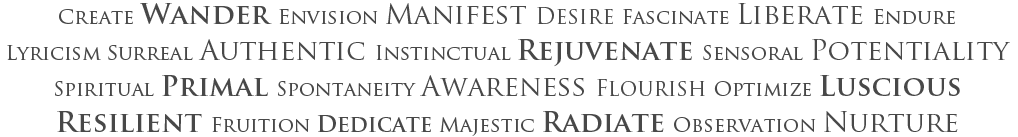
<style>
.page{position:relative;width:1018px;height:137px;background:#ffffff}
.page>*{position:absolute;margin:0}
.t1{font:20px/36px "TrajanPro-Regular";letter-spacing:-0.005em;color:#484848}
.t2{font:28px/36px "TrajanPro-Bold";letter-spacing:-0.005em;color:#484848}
.t3{font:28px/36px "TrajanPro-Regular";letter-spacing:-0.005em;color:#484848}
.t4{font:22px/36px "TrajanPro-Regular";letter-spacing:-0.005em;color:#484848}
.t5{font:22px/36px "TrajanPro-Bold";letter-spacing:-0.005em;color:#484848}
</style>
<div class="page">
<p class="t1" style="left:7px;top:3px;width:1003px;height:133px;text-align:center">Create <span class="t2">Wander </span>Envision <span class="t3">Manifest </span><span class="t4">Desire </span>Fascinate <span class="t3">Liberate </span>Endure<br>Lyricism Surreal <span class="t3">Authentic </span>Instinctual <span class="t2">Rejuvenate </span>Sensoral <span class="t3">Potentiality<br></span>Spiritual <span class="t2">Primal </span>Spontaneity <span class="t3">Awareness </span><span class="t4">Flourish </span>Optimize <span class="t2">Luscious<br>Resilient </span>Fruition <span class="t5">Dedicate </span>Majestic <span class="t2">Radiate </span>Observation <span class="t3">Nurture</span></p>
</div>
